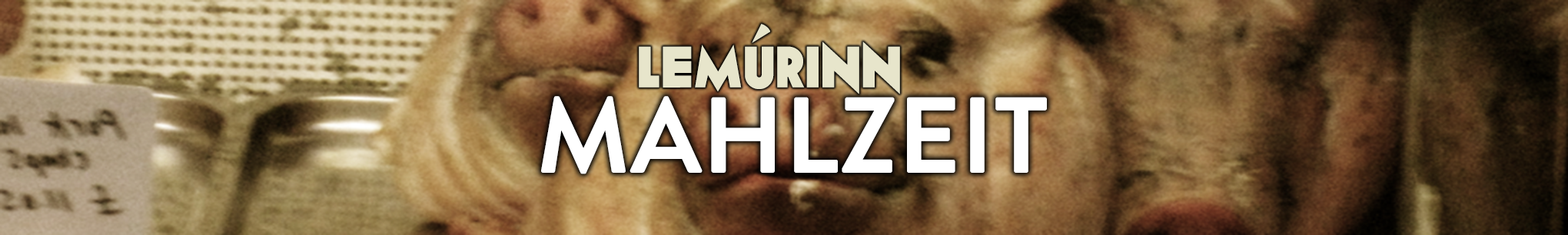
<style>
.page{position:relative;width:1568px;height:235px}
.page>*{position:absolute;margin:0}
.t1{font:57.6px "Geomancy-ExtraBold";color:#e7e5cb}
.t2{font:107.6px "BrandonGrotesque-Bold";color:#ffffff}
</style>
<div class="page">
<p class="t1" style="left:639px;top:24px;width:261px;height:71px">LEMÚrINN</p>
<p class="t2" style="left:541px;top:96px;width:506px;height:78px">MAHLZEIT</p>
</div>
